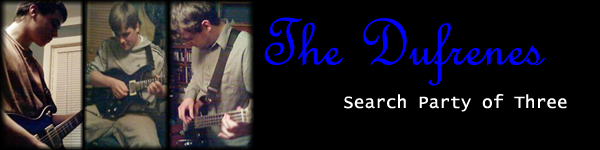
<style>
.page{position:relative;width:600px;height:150px;background:#000000}
.page>*{position:absolute;margin:0}
.t1{font:71px "FrenchScriptMT";color:#0000ff}
.t2{font:17.8px "LucidaConsole";color:#ffffff}
</style>
<div class="page">
<p class="t1" style="left:264px;top:17px;width:281px;height:69px">The Dufrenes</p>
<p class="t2" style="left:344px;top:94px;width:223px;height:18px">Search Party of Three</p>
</div>
